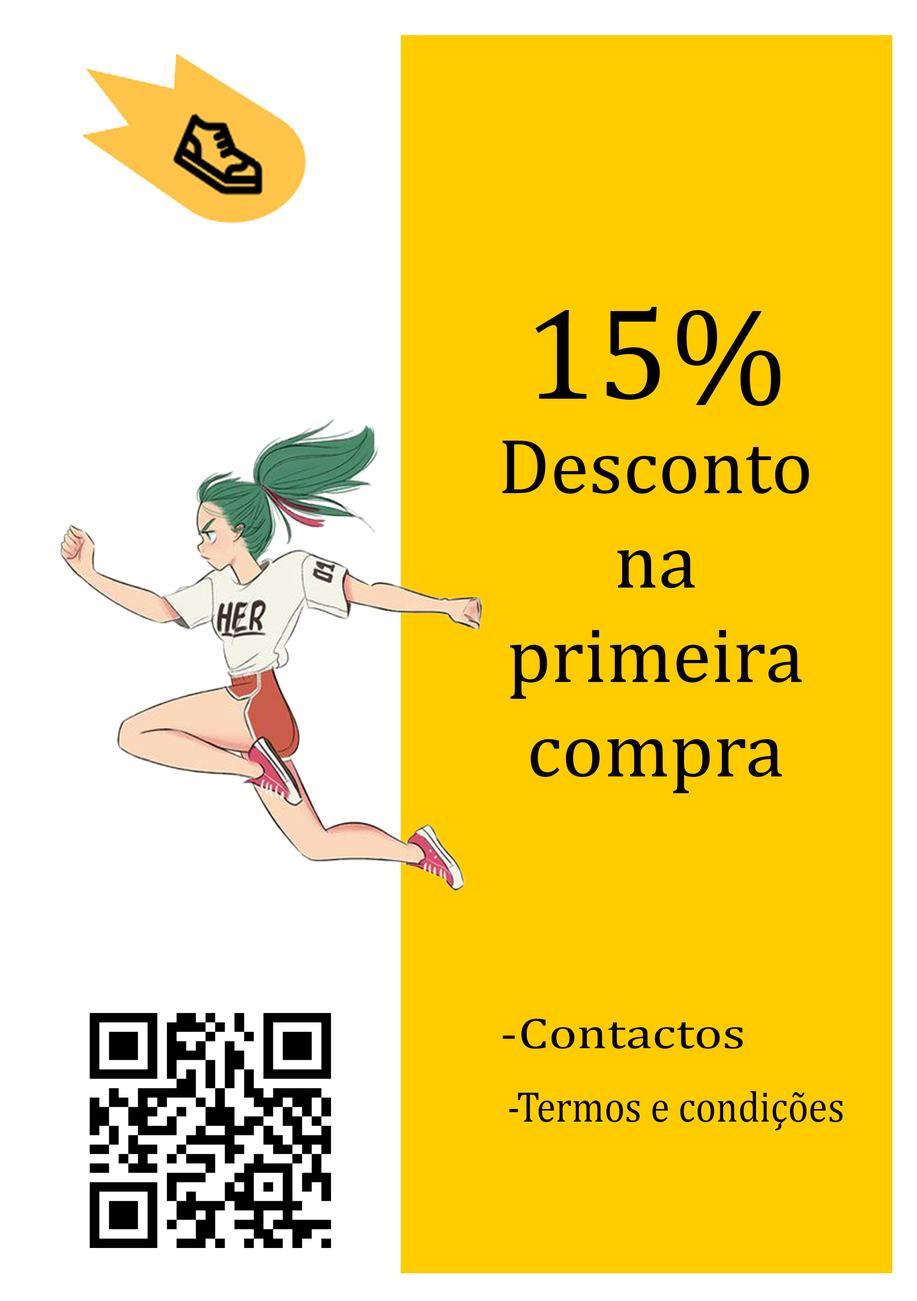
<style>
.page{position:relative;width:917px;height:1301px;background:#ffcc00}
.page>*{position:absolute;margin:0}
.t1{font:78.7px "Cambria";letter-spacing:0.005em;color:#000000}
.t2{font:131.1px "Cambria";letter-spacing:0.005em;color:#000000}
.t3{font:43.7px "Cambria";letter-spacing:0.005em;color:#000000;scale:1.22 1}
.t4{font:43.7px "Cambria";letter-spacing:0.005em;color:#000000;scale:0.89 1}
</style>
<div class="page">
<p class="t1" style="left:502px;top:307px;width:307px;height:486px;text-align:center"><span class="t2">15%<br></span>Desconto<br>na<br>primeira<br>compra</p>
<p class="t3" style="left:502px;top:1019px;width:241px;height:29px">-Contactos</p>
<p class="t4" style="left:509px;top:1091px;width:334px;height:39px">-Termos e condições</p>
</div>
